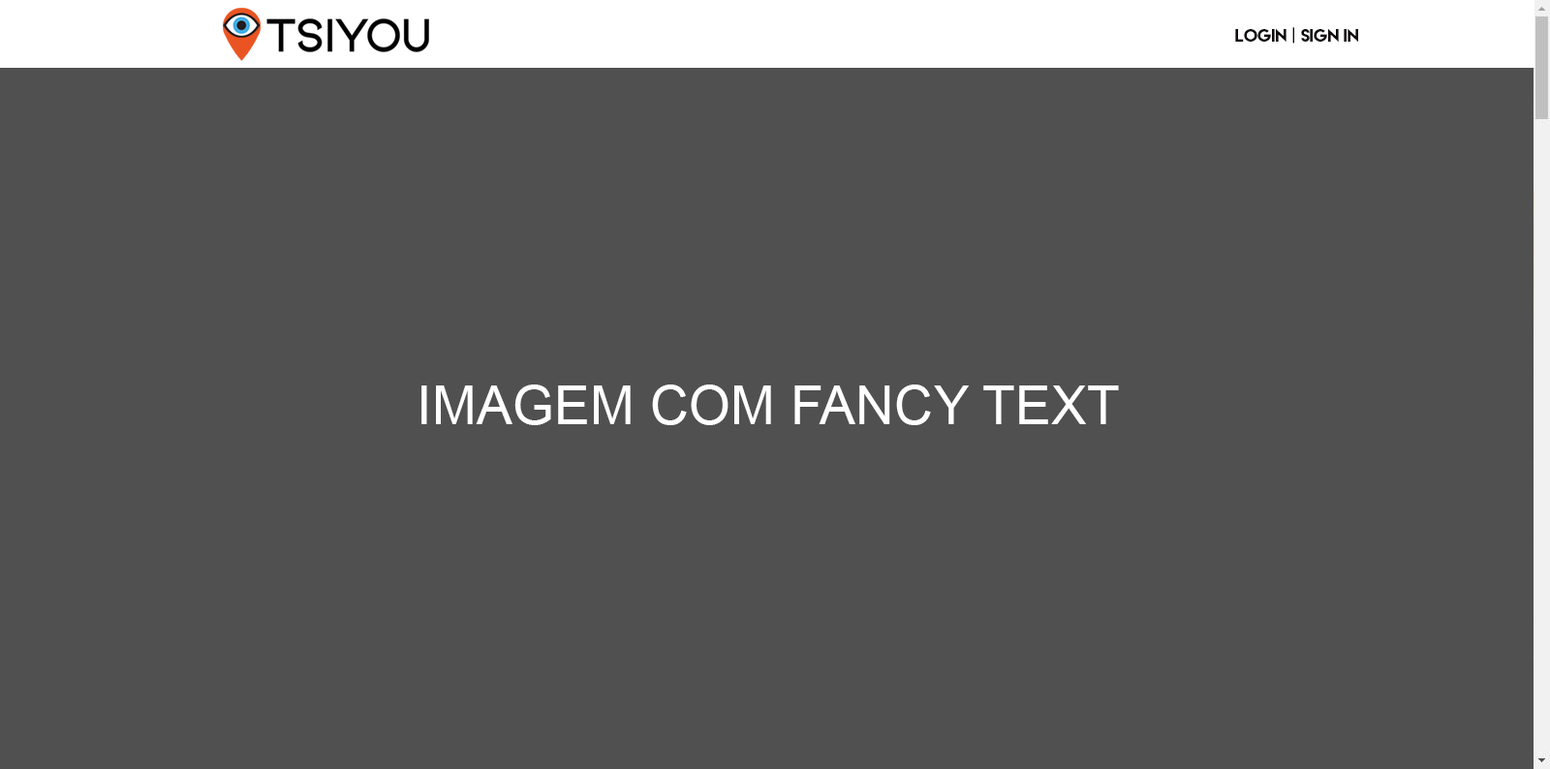
<style>
.page{position:relative;width:1550px;height:769px;background:#505050}
.page>*{position:absolute;margin:0}
.t1{font:15.9px "LemonMilk";color:#0f0b0c}
.t2{font:54.1px "ArialMT";color:#ffffff}
</style>
<div class="page">
<p class="t1" style="left:1235px;top:27px;width:123px;height:17px">Login | sign in</p>
<p class="t2" style="left:421px;top:385px;width:698px;height:40px">IMAGEM COM FANCY TEXT</p>
</div>
